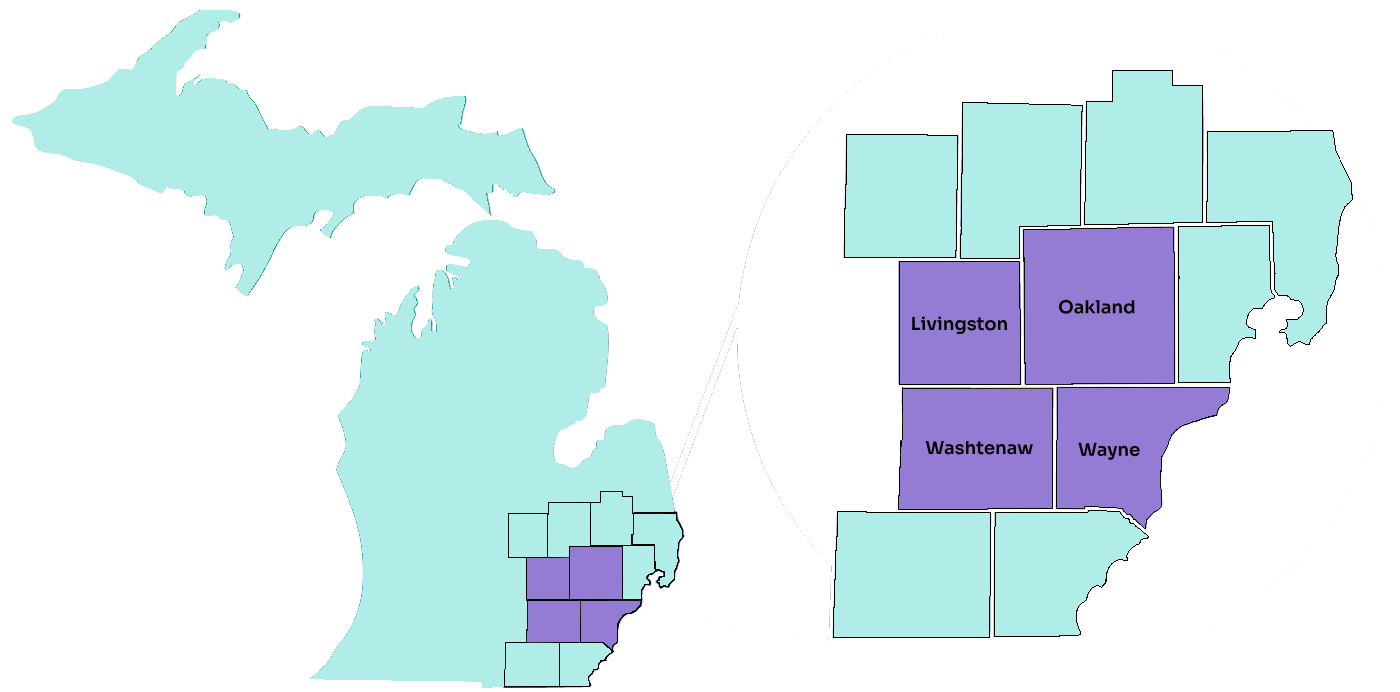
<style>
.page{position:relative;width:1400px;height:692px;background:#ffffff}
.page>*{position:absolute;margin:0}
.t1{font:18px "Sora-SemiBold";color:#000000}
</style>
<div class="page">
<p class="t1" style="left:1059px;top:299px;width:76px;height:15px">Oakland</p>
<p class="t1" style="left:912px;top:316px;width:95px;height:18px">Livingston</p>
<p class="t1" style="left:925px;top:440px;width:108px;height:15px">Washtenaw</p>
<p class="t1" style="left:1078px;top:442px;width:62px;height:18px">Wayne</p>
</div>
